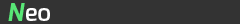
<style>
.page{position:relative;width:240px;height:24px;background:#333333}
.page>*{position:absolute;margin:0}
.t1{font:24px "Exo-BoldItalic";color:#58e776}
.t2{font:24px "Exo-DemiBold";color:#ffffff}
</style>
<div class="page">
<p class="t1" style="left:8px;top:3px;width:17px;height:18px">N</p>
<p class="t2" style="left:26px;top:8px;width:24px;height:13px">eo</p>
</div>
